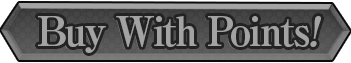
<style>
.page{position:relative;width:351px;height:63px}
.page>*{position:absolute;margin:0}
.t1{font:40px "RyuminPro-ExBold";letter-spacing:-0.06em;color:#a3a3a3}
.t2{font:40px "RyuminPro-ExBold";letter-spacing:-0.06em;color:#a3a3a3;font-style:italic}
</style>
<div class="page">
<p class="t1" style="left:38px;top:16px;width:283px;height:37px">Buy With Points<span class="t2">!</span></p>
</div>
